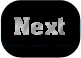
<style>
.page{position:relative;width:81px;height:58px;background:#000000}
.page>*{position:absolute;margin:0}
.t1{font:24px "AcmeFont";color:#aaaaaa}
</style>
<div class="page">
<p class="t1" style="left:14px;top:17px;width:51px;height:18px">Next</p>
</div>
